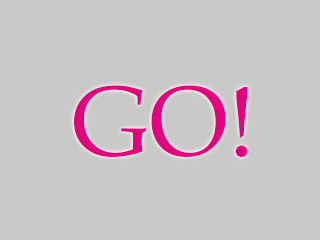
<style>
.page{position:relative;width:320px;height:240px;background:#c9c9c9}
.page>*{position:absolute;margin:0}
.t1{font:100px "BookAntiqua";color:#e4007f}
</style>
<div class="page">
<p class="t1" style="left:74px;top:85px;width:174px;height:72px">GO!</p>
</div>
